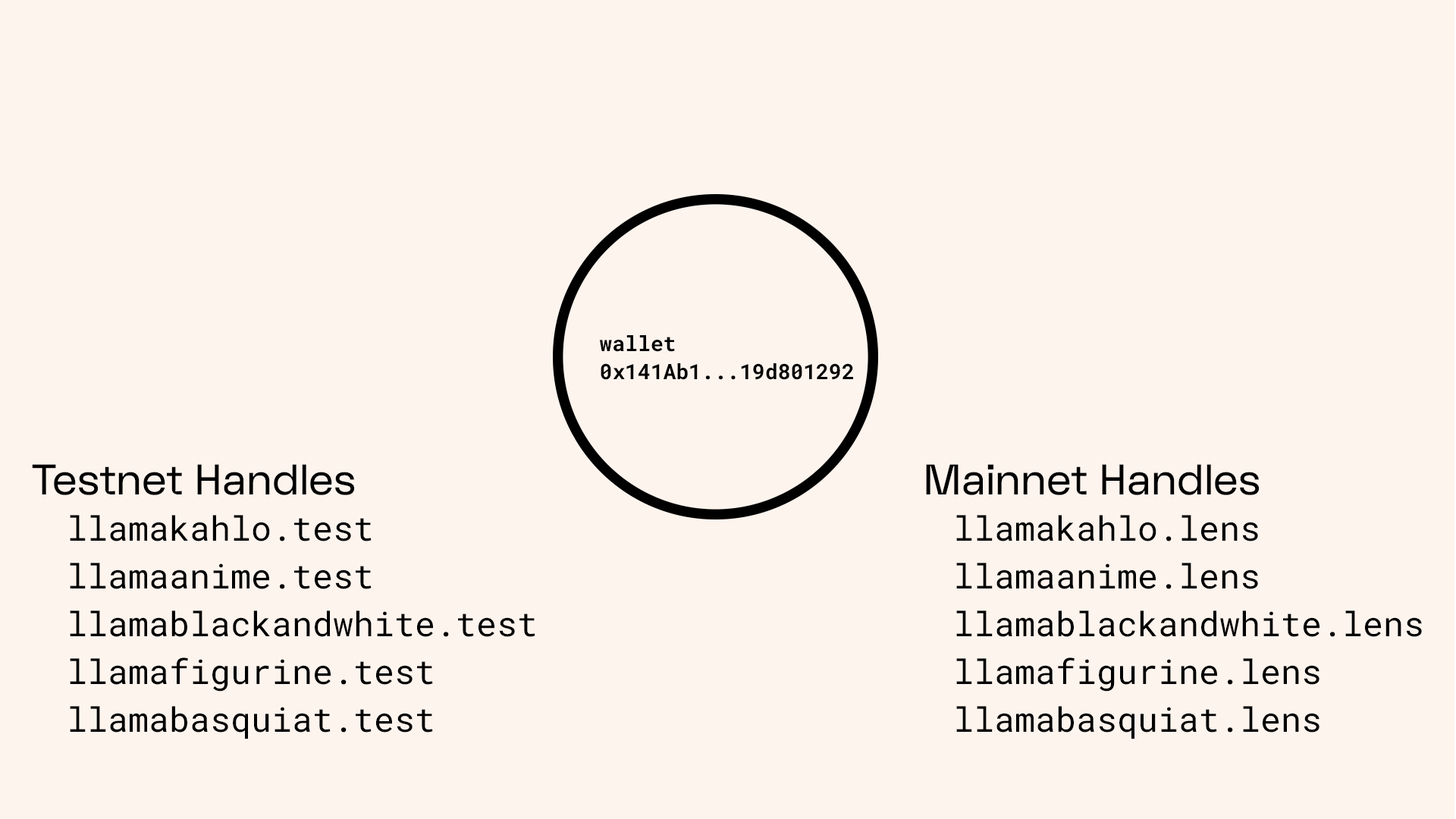
<style>
.page{position:relative;width:1456px;height:819px;background:#fef4ee}
.page>*{position:absolute;margin:0}
.t1{font:21.2px/28.1px "RobotoMono-Bold";color:#000000}
.t2{font:41.7px "FKDisplay-RegularAlt";color:#000000}
.t3{font:34.1px/47.8px "RobotoMono-Regular";color:#000000}
</style>
<div class="page">
<p class="t1" style="left:599px;top:335px;width:254px;height:45px">wallet<br>0x141Ab1...19d801292</p>
<p class="t2" style="left:32px;top:464px;width:322px;height:31px">Testnet Handles</p>
<p class="t2" style="left:926px;top:464px;width:333px;height:31px">Mainnet Handles</p>
<p class="t3" style="left:70px;top:515px;width:465px;height:224px">llamakahlo.test<br>llamaanime.test<br>llamablackandwhite.test<br>llamafigurine.test<br>llamabasquiat.test</p>
<p class="t3" style="left:956px;top:515px;width:466px;height:224px">llamakahlo.lens<br>llamaanime.lens<br>llamablackandwhite.lens<br>llamafigurine.lens<br>llamabasquiat.lens</p>
</div>
